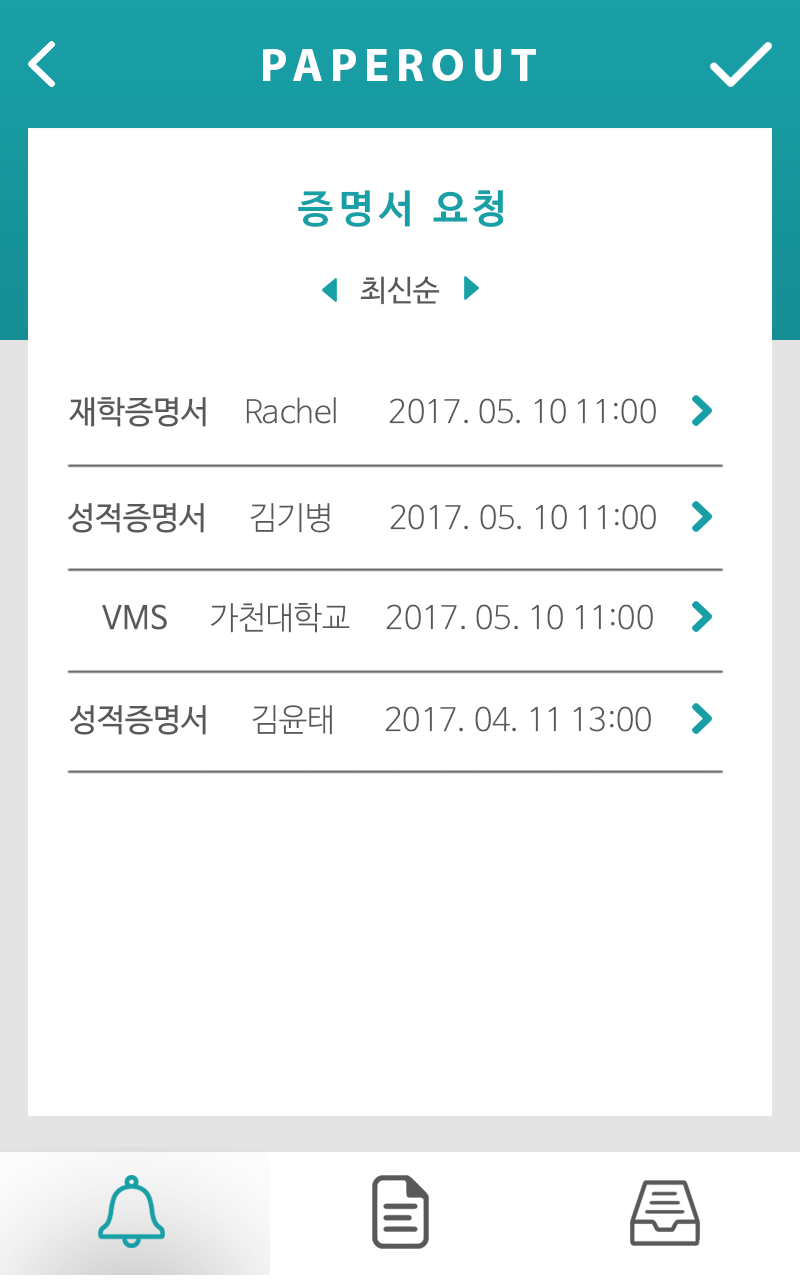
<style>
.page{position:relative;width:800px;height:1280px;background:#ffffff}
.page>*{position:absolute;margin:0}
.t1{font:46.9px "MyriadPro-Bold";letter-spacing:0.15em;color:#ffffff}
.t2{font:29.9px "NanumBarunGothicOTF";color:#595959}
.t3{font:31.8px "NanumBarunGothicOTFLight";color:#595959}
.t4{font:31.8px "NanumBarunGothicOTF";color:#595959}
</style>
<div class="page">
<p class="t1" style="left:263px;top:49px;width:273px;height:32px">PAPEROUT</p>
<p class="t2" style="left:360px;top:276px;width:80px;height:29px">최신순</p>
<p class="t3" style="left:69px;top:397px;width:587px;height:30px"><span class="t4">재학증명서</span>     Rachel       2017. 05. 10 11:00</p>
<p class="t3" style="left:67px;top:503px;width:589px;height:30px"><span class="t4">성적증명서</span>      김기병        2017. 05. 10 11:00</p>
<p class="t3" style="left:102px;top:603px;width:551px;height:30px"><span class="t4"> VMS </span>     가천대학교     2017. 05. 10 11:00</p>
<p class="t3" style="left:69px;top:705px;width:582px;height:30px"><span class="t4">성적증명서</span>      김윤태       2017. 04. 11 13:00</p>
</div>
